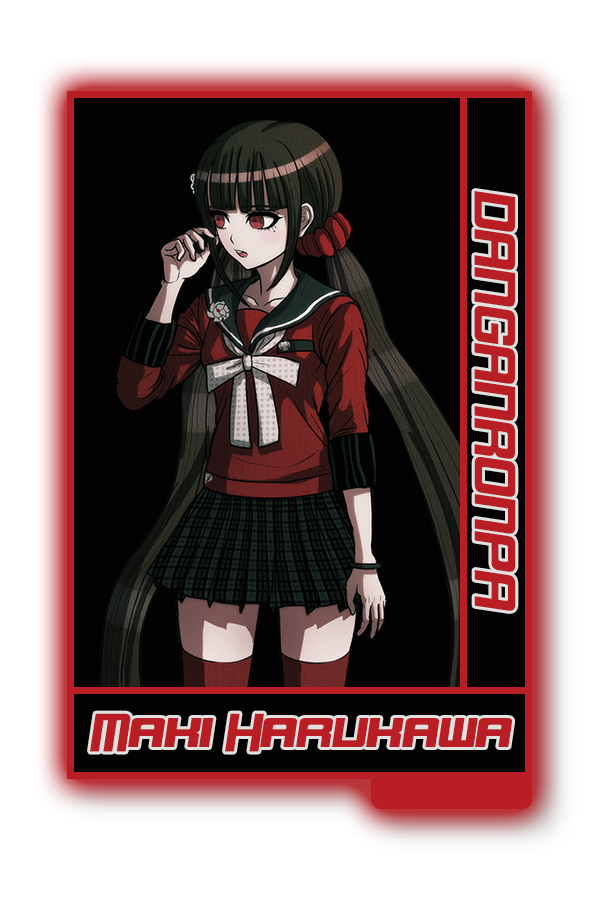
<style>
.page{position:relative;width:600px;height:900px;background:#020202}
.page>*{position:absolute;margin:0}
.t1{font:48.8px "DorBlue";color:#bb2c2e}
.t2{font:45.6px "DorBlue";color:#bb2c2e}
</style>
<div class="page">
<p class="t1" style="left:474px;top:191px;width:42px;height:420px;rotate:90deg">DANGANRONPA</p>
<p class="t2" style="left:90px;top:713px;width:422px;height:39px">Maki Harukawa</p>
</div>
